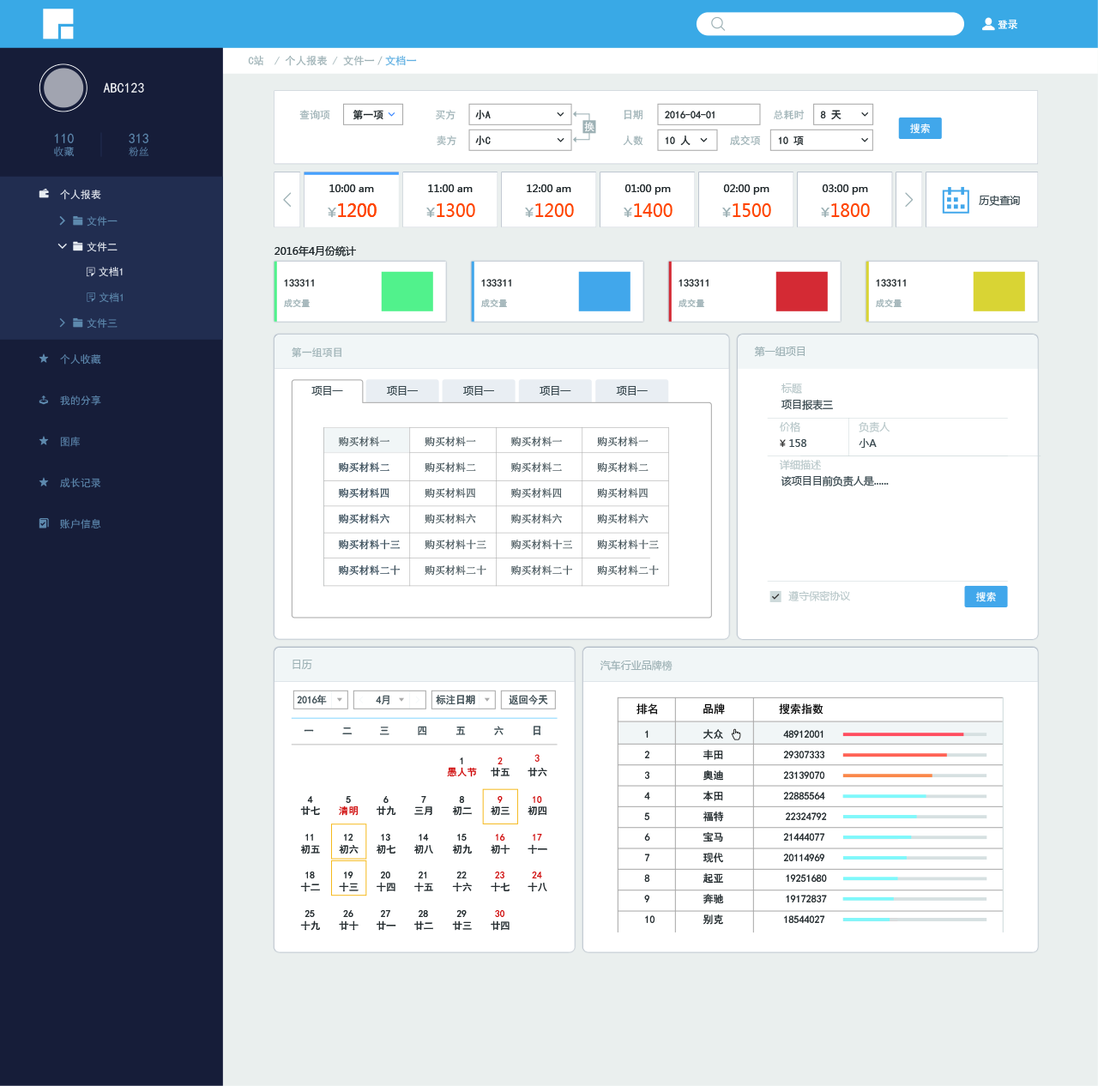
<style>
.page{position:relative;width:1098px;height:1086px;background:#ffffff}
.page>*{position:absolute;margin:0}
.t1{font:10.3px "AdobeHeitiStd-Regular";color:#ffffff}
.t2{font:10.5px "SimHei";color:#9db1b5}
.t3{font:10.5px "SimHei";color:#61b0e2}
.t4{font:13.7px "SimHei";color:#f4f5f5}
.t5{font:10.3px "SimHei";color:#9db1b5}
.t6{font:10.3px "SimHei";color:#1d2528}
.t7{font:10.3px "SimHei";color:#ffffff}
.t8{font:13.7px "SimHei";color:#5d89ad}
.t9{font:10.3px "SimSun";color:#5d89ad}
.t10{font:10.3px "MicrosoftYaHei";color:#1d2528}
.t11{font:10.3px/41.2px "SimHei";color:#5d89ad}
.t12{font:10.3px/41.2px "SimHei";color:#e9eef3}
.t13{font:10.3px "MicrosoftYaHei";color:#3a4950}
.t14{font:18px "MicrosoftYaHei";color:#ff4400;scale:0.95 1}
.t15{font:10.3px "SimHei";color:#5d89ad}
.t16{font:10.3px "SimHei";color:#e9eef3}
.t17{font:8.6px "SimHei";color:#9db1b5}
.t18{font:10.3px "MicrosoftYaHei";color:#9db1b5}
.t19{font:10.3px "MicrosoftYaHei";color:#b9c8ca}
.t20{font:10.3px/25.7px "SimSun"}
.t21{font:10.3px/25.7px "SimSun";color:#3a4950}
.t22{font:10.3px "SimHei";color:#3a4950;scale:0.95 1}
.t23{font:11.2px "SimHei";color:#000000}
.t24{font:10.3px/20.6px "SimHei";color:#1d2528}
.t25{font:9.7px "SimHei";color:#1d2528}
.t26{font:9.7px "SimHei";color:#cd0000}
.t27{font:10.3px "SimHei";color:#cd0000}
.t28{font:9.7px "SimHei";letter-spacing:0.04em;color:#cd0000}
</style>
<div class="page">
<p class="t1" style="left:998px;top:19px;width:19px;height:10px">登录</p>
<p class="t2" style="left:248px;top:55px;width:169px;height:11px">C站  / 个人报表 / 文件一／<span class="t3">文档一</span></p>
<p class="t4" style="left:103px;top:82px;width:41px;height:11px">ABC123</p>
<p class="t5" style="left:299px;top:110px;width:31px;height:10px">查询项</p>
<p class="t6" style="left:353px;top:110px;width:30px;height:10px">第一项</p>
<p class="t5" style="left:436px;top:110px;width:20px;height:10px">买方</p>
<p class="t6" style="left:475px;top:110px;width:16px;height:10px">小A</p>
<p class="t5" style="left:624px;top:110px;width:19px;height:10px">日期</p>
<p class="t6" style="left:665px;top:111px;width:50px;height:7px">2016-04-01</p>
<p class="t5" style="left:774px;top:110px;width:31px;height:10px">总耗时</p>
<p class="t6" style="left:820px;top:110px;width:22px;height:10px">8 天</p>
<p class="t7" style="left:584px;top:122px;width:10px;height:10px">换</p>
<p class="t7" style="left:910px;top:124px;width:20px;height:10px">搜索</p>
<p class="t8" style="left:54px;top:133px;width:20px;height:10px">110</p>
<p class="t8" style="left:129px;top:133px;width:19px;height:10px">313</p>
<p class="t5" style="left:437px;top:136px;width:19px;height:10px">卖方</p>
<p class="t6" style="left:475px;top:136px;width:16px;height:10px">小C</p>
<p class="t5" style="left:623px;top:136px;width:20px;height:10px">人数</p>
<p class="t6" style="left:665px;top:136px;width:26px;height:10px">10 人</p>
<p class="t5" style="left:730px;top:136px;width:31px;height:10px">成交项</p>
<p class="t6" style="left:778px;top:136px;width:26px;height:10px">10 项</p>
<p class="t9" style="left:54px;top:147px;width:20px;height:10px">收藏</p>
<p class="t9" style="left:129px;top:147px;width:20px;height:10px">粉丝</p>
<p class="t10" style="left:329px;top:184px;width:45px;height:8px">10:00 am</p>
<p class="t10" style="left:329px;top:184px;width:45px;height:8px">10:00 am</p>
<p class="t10" style="left:428px;top:184px;width:45px;height:8px">11:00 am</p>
<p class="t10" style="left:527px;top:184px;width:44px;height:8px">12:00 am</p>
<p class="t10" style="left:624px;top:184px;width:47px;height:11px">01:00 pm</p>
<p class="t10" style="left:723px;top:184px;width:46px;height:11px">02:00 pm</p>
<p class="t10" style="left:822px;top:184px;width:46px;height:11px">03:00 pm</p>
<p class="t11" style="left:60px;top:190px;width:41px;height:339px"><span class="t12">个人报表<br></span><br><br><br>个人收藏<br>我的分享<br>图库<br>成长记录<br>账户信息</p>
<p class="t13" style="left:979px;top:195px;width:41px;height:11px">历史查询</p>
<p class="t14" style="left:338px;top:203px;width:39px;height:14px">1200</p>
<p class="t14" style="left:338px;top:203px;width:39px;height:14px">1200</p>
<p class="t14" style="left:437px;top:203px;width:38px;height:14px">1300</p>
<p class="t14" style="left:535px;top:203px;width:39px;height:14px">1200</p>
<p class="t14" style="left:634px;top:203px;width:39px;height:14px">1400</p>
<p class="t14" style="left:733px;top:203px;width:38px;height:14px">1500</p>
<p class="t14" style="left:831px;top:203px;width:39px;height:14px">1800</p>
<p class="t15" style="left:87px;top:216px;width:31px;height:10px">文件一</p>
<p class="t16" style="left:87px;top:242px;width:31px;height:10px">文件二</p>
<p class="t10" style="left:275px;top:245px;width:81px;height:11px">2016年4月份统计</p>
<p class="t16" style="left:99px;top:267px;width:24px;height:10px">文档1</p>
<p class="t6" style="left:284px;top:279px;width:30px;height:8px">133311</p>
<p class="t6" style="left:481px;top:279px;width:30px;height:8px">133311</p>
<p class="t6" style="left:679px;top:279px;width:30px;height:8px">133311</p>
<p class="t6" style="left:876px;top:279px;width:30px;height:8px">133311</p>
<p class="t15" style="left:99px;top:293px;width:24px;height:10px">文档1</p>
<p class="t17" style="left:284px;top:299px;width:26px;height:9px">成交量</p>
<p class="t17" style="left:481px;top:299px;width:26px;height:9px">成交量</p>
<p class="t17" style="left:679px;top:299px;width:25px;height:9px">成交量</p>
<p class="t17" style="left:876px;top:299px;width:26px;height:9px">成交量</p>
<p class="t15" style="left:87px;top:318px;width:31px;height:11px">文件三</p>
<p class="t5" style="left:292px;top:347px;width:49px;height:11px">第一组项目</p>
<p class="t18" style="left:754px;top:346px;width:51px;height:11px">第一组项目</p>
<p class="t13" style="left:311px;top:386px;width:32px;height:9px">项目一</p>
<p class="t13" style="left:387px;top:386px;width:31px;height:9px">项目一</p>
<p class="t13" style="left:463px;top:386px;width:31px;height:9px">项目一</p>
<p class="t13" style="left:540px;top:386px;width:31px;height:9px">项目一</p>
<p class="t13" style="left:616px;top:386px;width:32px;height:9px">项目一</p>
<p class="t19" style="left:781px;top:383px;width:21px;height:11px">标题</p>
<p class="t13" style="left:781px;top:399px;width:52px;height:11px">项目报表三</p>
<p class="t19" style="left:780px;top:421px;width:20px;height:11px">价格</p>
<p class="t19" style="left:859px;top:421px;width:31px;height:11px">负责人</p>
<p class="t20" style="left:339px;top:437px;width:61px;height:139px">购买材料一<br> 购买材料二<br> 购买材料四 <br> 购买材料六<br> 购买材料十三<br> 购买材料二十</p>
<p class="t21" style="left:339px;top:437px;width:61px;height:139px">购买材料一<br> 购买材料二<br> 购买材料四 <br> 购买材料六<br> 购买材料十三<br> 购买材料二十</p>
<p class="t21" style="left:425px;top:437px;width:61px;height:139px">购买材料一<br> 购买材料二<br> 购买材料四 <br> 购买材料六<br> 购买材料十三<br> 购买材料二十</p>
<p class="t21" style="left:511px;top:437px;width:61px;height:139px">购买材料一<br> 购买材料二<br> 购买材料四 <br> 购买材料六<br> 购买材料十三<br> 购买材料二十</p>
<p class="t21" style="left:597px;top:437px;width:62px;height:139px">购买材料一<br> 购买材料二<br> 购买材料四 <br> 购买材料六<br> 购买材料十三<br> 购买材料二十</p>
<p class="t13" style="left:789px;top:439px;width:17px;height:8px">158</p>
<p class="t13" style="left:859px;top:438px;width:18px;height:10px">小A</p>
<p class="t19" style="left:779px;top:459px;width:42px;height:11px">详细描述</p>
<p class="t13" style="left:781px;top:475px;width:108px;height:11px">该项目目前负责人是......</p>
<p class="t19" style="left:788px;top:591px;width:62px;height:10px">遵守保密协议</p>
<p class="t7" style="left:975px;top:592px;width:21px;height:10px">搜索</p>
<p class="t18" style="left:293px;top:660px;width:19px;height:9px">日历</p>
<p class="t18" style="left:600px;top:660px;width:73px;height:11px">汽车行业品牌榜</p>
<p class="t22" style="left:297px;top:695px;width:30px;height:10px">2016年</p>
<p class="t22" style="left:376px;top:695px;width:13px;height:10px">4月</p>
<p class="t22" style="left:436px;top:695px;width:39px;height:10px">标注日期</p>
<p class="t22" style="left:509px;top:695px;width:39px;height:10px">返回今天</p>
<p class="t23" style="left:637px;top:703px;width:187px;height:12px">排名       品牌         搜索指数</p>
<p class="t22" style="left:418px;top:726px;width:8px;height:10px">四</p>
<p class="t22" style="left:494px;top:726px;width:10px;height:9px">六</p>
<p class="t22" style="left:534px;top:726px;width:6px;height:10px">日</p>
<p class="t22" style="left:304px;top:729px;width:10px;height:3px">一</p>
<p class="t22" style="left:342px;top:727px;width:10px;height:8px">二</p>
<p class="t22" style="left:380px;top:727px;width:9px;height:8px">三</p>
<p class="t22" style="left:456px;top:727px;width:10px;height:8px">五</p>
<p class="t24" style="left:644px;top:729px;width:183px;height:196px">1      大众         48912001<br>2      丰田         29307333<br>3      奥迪         23139070<br>4      本田         22885564<br>5      福特    22324792<br>6      宝马         21444077<br>7      现代         20114969<br>8      起亚    19251680<br>9      奔驰    19172837<br>10      别克         18544027</p>
<p class="t25" style="left:460px;top:757px;width:3px;height:7px">1</p>
<p class="t26" style="left:498px;top:757px;width:5px;height:7px">2</p>
<p class="t27" style="left:534px;top:754px;width:6px;height:8px">3</p>
<p class="t28" style="left:447px;top:767px;width:30px;height:10px">愚人节</p>
<p class="t25" style="left:491px;top:767px;width:19px;height:10px">廿五</p>
<p class="t25" style="left:528px;top:767px;width:19px;height:10px">廿六</p>
<p class="t25" style="left:307px;top:796px;width:6px;height:7px">4</p>
<p class="t25" style="left:346px;top:796px;width:5px;height:7px">5</p>
<p class="t25" style="left:383px;top:796px;width:6px;height:7px">6</p>
<p class="t25" style="left:421px;top:796px;width:5px;height:7px">7</p>
<p class="t25" style="left:459px;top:796px;width:5px;height:7px">8</p>
<p class="t26" style="left:498px;top:796px;width:5px;height:7px">9</p>
<p class="t26" style="left:533px;top:796px;width:9px;height:7px">10</p>
<p class="t25" style="left:300px;top:805px;width:20px;height:11px">廿七</p>
<p class="t28" style="left:339px;top:805px;width:20px;height:11px">清明</p>
<p class="t25" style="left:377px;top:805px;width:19px;height:11px">廿九</p>
<p class="t25" style="left:414px;top:806px;width:18px;height:10px">三月</p>
<p class="t25" style="left:452px;top:805px;width:20px;height:11px">初二</p>
<p class="t25" style="left:491px;top:805px;width:19px;height:11px">初三</p>
<p class="t25" style="left:528px;top:805px;width:18px;height:11px">初四</p>
<p class="t25" style="left:305px;top:834px;width:8px;height:7px">11</p>
<p class="t25" style="left:344px;top:834px;width:9px;height:7px">12</p>
<p class="t25" style="left:381px;top:834px;width:9px;height:7px">13</p>
<p class="t25" style="left:419px;top:834px;width:10px;height:7px">14</p>
<p class="t25" style="left:457px;top:834px;width:10px;height:7px">15</p>
<p class="t26" style="left:495px;top:834px;width:10px;height:7px">16</p>
<p class="t26" style="left:533px;top:834px;width:9px;height:7px">17</p>
<p class="t25" style="left:300px;top:844px;width:20px;height:10px">初五</p>
<p class="t25" style="left:339px;top:844px;width:20px;height:10px">初六</p>
<p class="t25" style="left:377px;top:844px;width:18px;height:10px">初七</p>
<p class="t25" style="left:414px;top:844px;width:19px;height:10px">初八</p>
<p class="t25" style="left:452px;top:844px;width:20px;height:10px">初九</p>
<p class="t25" style="left:491px;top:844px;width:19px;height:10px">初十</p>
<p class="t25" style="left:528px;top:844px;width:19px;height:10px">十一</p>
<p class="t25" style="left:300px;top:882px;width:20px;height:10px">十二</p>
<p class="t25" style="left:305px;top:872px;width:10px;height:6px">18</p>
<p class="t25" style="left:339px;top:882px;width:20px;height:10px">十三</p>
<p class="t25" style="left:344px;top:872px;width:9px;height:6px">19</p>
<p class="t25" style="left:377px;top:882px;width:18px;height:10px">十四</p>
<p class="t25" style="left:381px;top:872px;width:9px;height:6px">20</p>
<p class="t25" style="left:414px;top:882px;width:19px;height:10px">十五</p>
<p class="t25" style="left:419px;top:872px;width:7px;height:6px">21</p>
<p class="t25" style="left:452px;top:882px;width:20px;height:10px">十六</p>
<p class="t25" style="left:456px;top:872px;width:11px;height:6px">22</p>
<p class="t25" style="left:491px;top:882px;width:19px;height:10px">十七</p>
<p class="t26" style="left:495px;top:872px;width:9px;height:6px">23</p>
<p class="t25" style="left:528px;top:882px;width:19px;height:10px">十八</p>
<p class="t26" style="left:532px;top:872px;width:10px;height:6px">24</p>
<p class="t25" style="left:305px;top:910px;width:10px;height:7px">25</p>
<p class="t25" style="left:343px;top:910px;width:10px;height:7px">26</p>
<p class="t25" style="left:381px;top:910px;width:9px;height:7px">27</p>
<p class="t25" style="left:419px;top:910px;width:9px;height:7px">28</p>
<p class="t25" style="left:456px;top:910px;width:11px;height:7px">29</p>
<p class="t26" style="left:495px;top:910px;width:9px;height:7px">30</p>
<p class="t25" style="left:300px;top:920px;width:20px;height:11px">十九</p>
<p class="t25" style="left:339px;top:920px;width:20px;height:11px">廿十</p>
<p class="t25" style="left:377px;top:920px;width:19px;height:11px">廿一</p>
<p class="t25" style="left:414px;top:920px;width:19px;height:11px">廿二</p>
<p class="t25" style="left:452px;top:920px;width:20px;height:11px">廿三</p>
<p class="t25" style="left:491px;top:920px;width:19px;height:11px">廿四</p>
</div>
